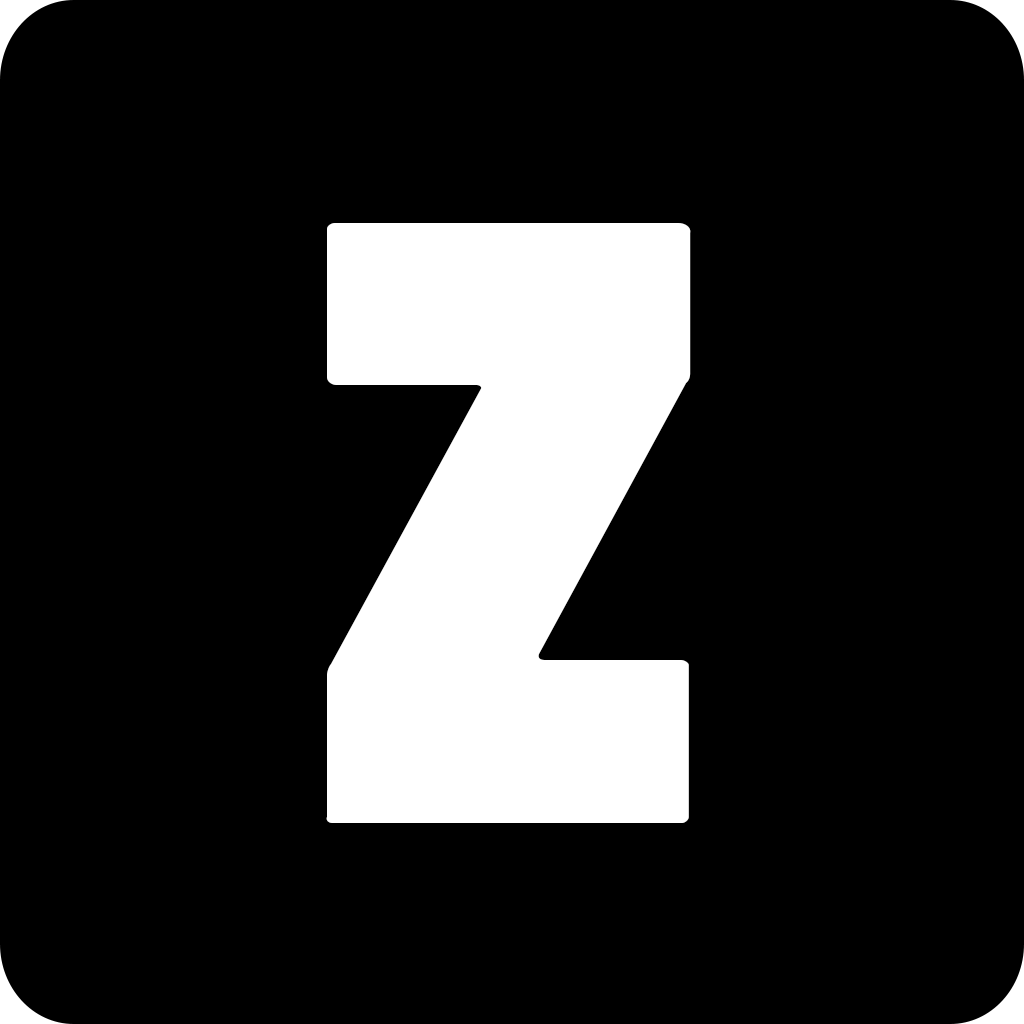
<style>
.page{position:relative;width:1024px;height:1024px;background:#000000}
.page>*{position:absolute;margin:0}
.t1{font:1000px "PoplarStd";color:#ffffff;scale:1.35 1}
</style>
<div class="page">
<p class="t1" style="left:326px;top:223px;width:365px;height:600px">z</p>
</div>
